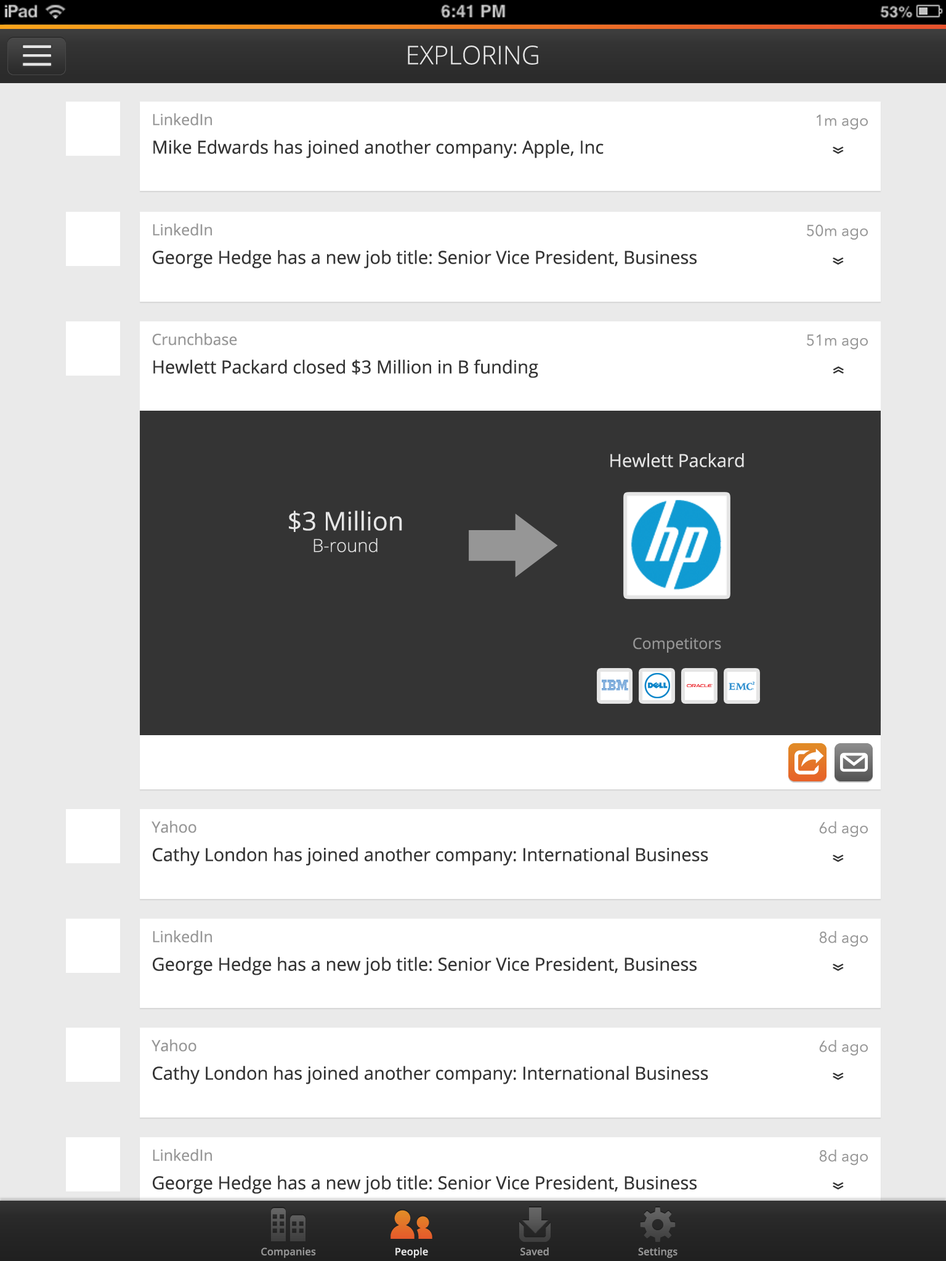
<style>
.page{position:relative;width:946px;height:1261px;background:#ffffff}
.page>*{position:absolute;margin:0}
.t1{font:25.7px "OpenSans-Light";color:#e5e5e5}
.t2{font:18px "OpenSans";color:#343434}
.t3{font:15.4px "OpenSans";color:#969696}
.t4{font:15.4px "AvenirNext-Regular";color:#969696}
.t5{font:25.7px "OpenSans";color:#343434;scale:0.64 1}
.t6{font:18px "OpenSans";color:#e5e5e5}
.t7{font:25.7px "OpenSans";color:#e5e5e5}
.t8{font:18px "OpenSans-Light";color:#e5e5e5}
.t9{font:10.3px "OpenSans-Semibold";color:#969696}
.t10{font:10.3px "OpenSans-Semibold";color:#e5e5e5}
</style>
<div class="page">
<p class="t1" style="left:408px;top:46px;width:130px;height:19px">EXPLORING</p>
<p class="t2" style="left:153px;top:113px;width:450px;height:45px"><span class="t3">LinkedIn<br></span>Mike Edwards has joined another company: Apple, Inc</p>
<p class="t4" style="left:816px;top:115px;width:51px;height:15px">1m ago</p>
<p class="t5" style="left:832px;top:147px;width:11px;height:7px;rotate:90deg">»</p>
<p class="t2" style="left:153px;top:223px;width:543px;height:45px"><span class="t3">LinkedIn<br></span>George Hedge has a new job title: Senior Vice President, Business Development</p>
<p class="t4" style="left:807px;top:224px;width:60px;height:16px">50m ago</p>
<p class="t5" style="left:832px;top:257px;width:11px;height:8px;rotate:90deg">»</p>
<p class="t2" style="left:152px;top:333px;width:386px;height:45px"><span class="t3">Crunchbase<br></span>Hewlett Packard closed $3 Million in B funding</p>
<p class="t4" style="left:807px;top:334px;width:60px;height:16px">51m ago</p>
<p class="t5" style="left:832px;top:366px;width:11px;height:8px;rotate:-90deg">»</p>
<p class="t6" style="left:610px;top:453px;width:134px;height:14px">Hewlett Packard</p>
<p class="t7" style="left:289px;top:510px;width:113px;height:42px;text-align:center">$3 Million<br><span class="t8">B-round</span></p>
<p class="t3" style="left:633px;top:637px;width:88px;height:16px">Competitors</p>
<p class="t2" style="left:151px;top:821px;width:557px;height:45px"><span class="t3">Yahoo<br></span>Cathy London has joined another company: International Business Machines</p>
<p class="t4" style="left:819px;top:821px;width:48px;height:16px">6d ago</p>
<p class="t5" style="left:832px;top:855px;width:11px;height:7px;rotate:90deg">»</p>
<p class="t2" style="left:153px;top:930px;width:543px;height:45px"><span class="t3">LinkedIn<br></span>George Hedge has a new job title: Senior Vice President, Business</p>
<p class="t4" style="left:819px;top:931px;width:48px;height:16px">8d ago</p>
<p class="t5" style="left:832px;top:964px;width:11px;height:7px;rotate:90deg">»</p>
<p class="t2" style="left:151px;top:1039px;width:557px;height:45px"><span class="t3">Yahoo<br></span>Cathy London has joined another company: International Business Machines</p>
<p class="t4" style="left:819px;top:1040px;width:48px;height:16px">6d ago</p>
<p class="t5" style="left:832px;top:1073px;width:11px;height:7px;rotate:90deg">»</p>
<p class="t2" style="left:153px;top:1149px;width:543px;height:45px"><span class="t3">LinkedIn<br></span>George Hedge has a new job title: Senior Vice President, Business</p>
<p class="t4" style="left:819px;top:1149px;width:48px;height:16px">8d ago</p>
<p class="t5" style="left:832px;top:1182px;width:11px;height:7px;rotate:90deg">»</p>
<p class="t9" style="left:261px;top:1247px;width:55px;height:11px">Companies</p>
<p class="t10" style="left:395px;top:1247px;width:33px;height:11px">People</p>
<p class="t9" style="left:520px;top:1247px;width:29px;height:8px">Saved</p>
<p class="t9" style="left:638px;top:1247px;width:39px;height:11px">Settings</p>
</div>
